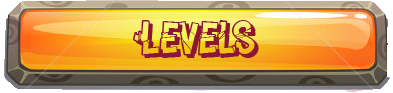
<style>
.page{position:relative;width:393px;height:93px}
.page>*{position:absolute;margin:0}
.t1{font:50px "PeintureFraiche";color:#8b1637}
</style>
<div class="page">
<p class="t1" style="left:133px;top:20px;width:126px;height:38px">Levels</p>
</div>
